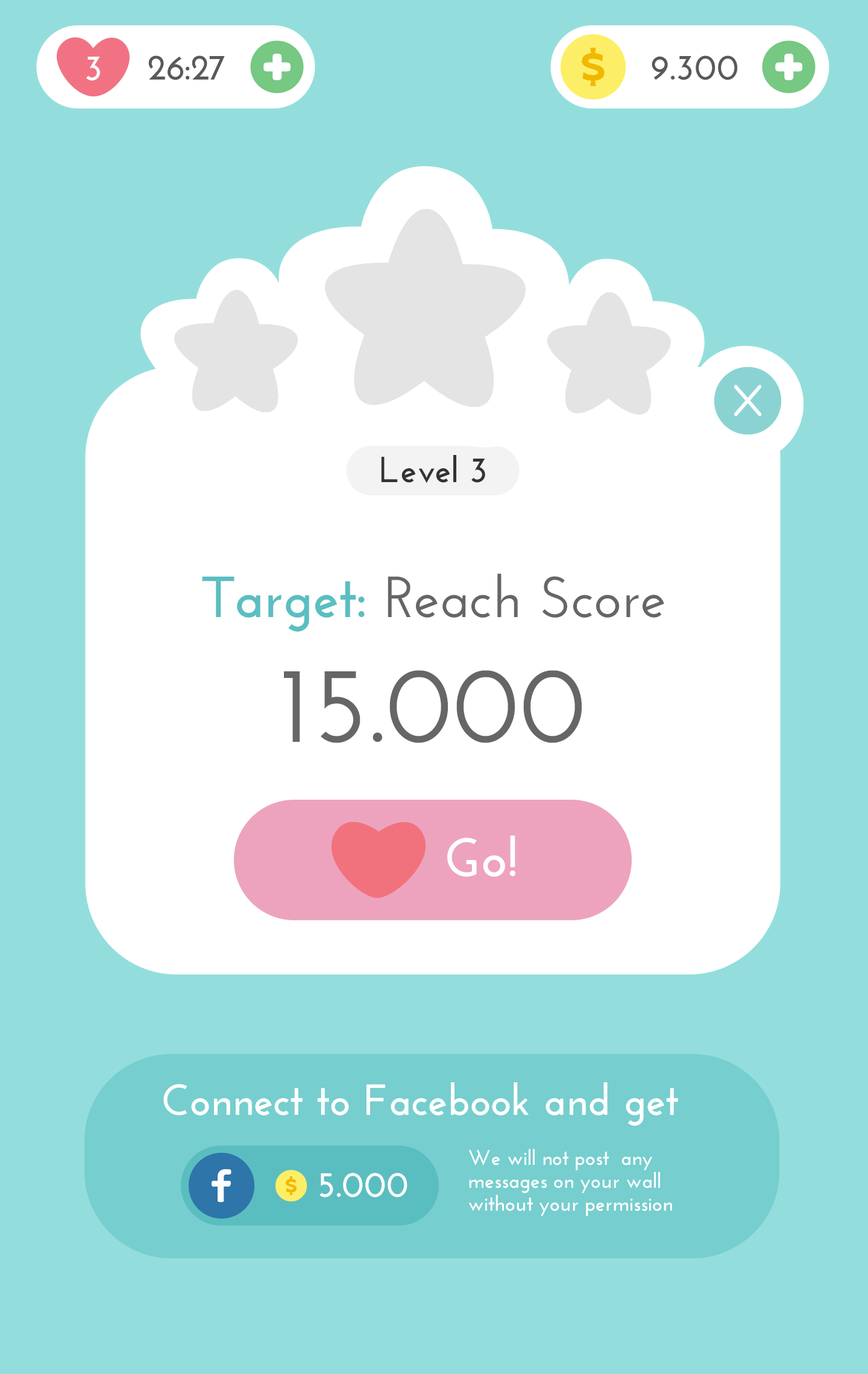
<style>
.page{position:relative;width:868px;height:1374px;background:#93dedd}
.page>*{position:absolute;margin:0}
.t1{font:36.2px "JosefinSans-Bold";color:#ffffff}
.t2{font:36.2px "JosefinSans-Bold";color:#595959}
.t3{font:36.2px "JosefinSans-Bold";color:#333333}
.t4{font:57.9px "JosefinSans-SemiBold";color:#666666}
.t5{font:57.9px "JosefinSans-Bold";color:#5bbec1}
.t6{font:108.5px "JosefinSans-SemiBold";color:#666666}
.t7{font:54.2px "JosefinSans-Bold";color:#ffffff}
.t8{font:43.4px "JosefinSans-Bold";color:#ffffff}
.t9{font:21.1px/22.8px "JosefinSans-Bold";color:#ffffff}
</style>
<div class="page">
<p class="t1" style="left:86px;top:57px;width:14px;height:24px">3</p>
<p class="t2" style="left:148px;top:55px;width:77px;height:25px">26:27</p>
<p class="t2" style="left:651px;top:55px;width:87px;height:25px">9.300</p>
<p class="t3" style="left:381px;top:455px;width:104px;height:28px">Level 3</p>
<p class="t4" style="left:202px;top:574px;width:462px;height:58px"><span class="t5">Target: </span>Reach Score</p>
<p class="t6" style="left:284px;top:670px;width:298px;height:73px">15.000</p>
<p class="t7" style="left:447px;top:835px;width:68px;height:42px">Go!</p>
<p class="t8" style="left:163px;top:1082px;width:515px;height:44px">Connect to Facebook and get</p>
<p class="t9" style="left:469px;top:1149px;width:203px;height:67px">We will not post  any messages on your wall  without your permission</p>
<p class="t1" style="left:319px;top:1173px;width:88px;height:24px">5.000</p>
</div>
